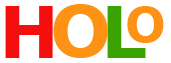
<style>
.page{position:relative;width:171px;height:63px;background:#ffffff}
.page>*{position:absolute;margin:0}
.t1{font:72px "Verdana-Bold";color:#f60e0e}
.t2{font:72px "Verdana-Bold";color:#fd9215}
.t3{font:72px "Verdana-Bold";color:#3ba302}
.t4{font:48px "Verdana-Bold";color:#fd9215}
</style>
<div class="page">
<p class="t1" style="left:5px;top:6px;width:48px;height:52px">H</p>
<p class="t2" style="left:53px;top:4px;width:55px;height:54px">O</p>
<p class="t3" style="left:107px;top:6px;width:39px;height:52px">L</p>
<p class="t4" style="left:127px;top:6px;width:37px;height:37px">O</p>
</div>
